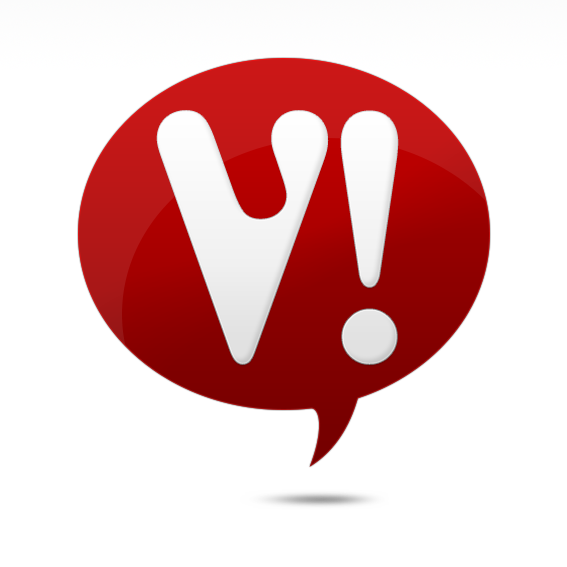
<style>
.page{position:relative;width:567px;height:567px;background:#ffffff}
.page>*{position:absolute;margin:0}
.t1{font:343.6px "AmeliaBT-Regular";color:#f4f4f4;text-transform:uppercase}
</style>
<div class="page">
<p class="t1" style="left:157px;top:111px;width:241px;height:253px">V!</p>
</div>
